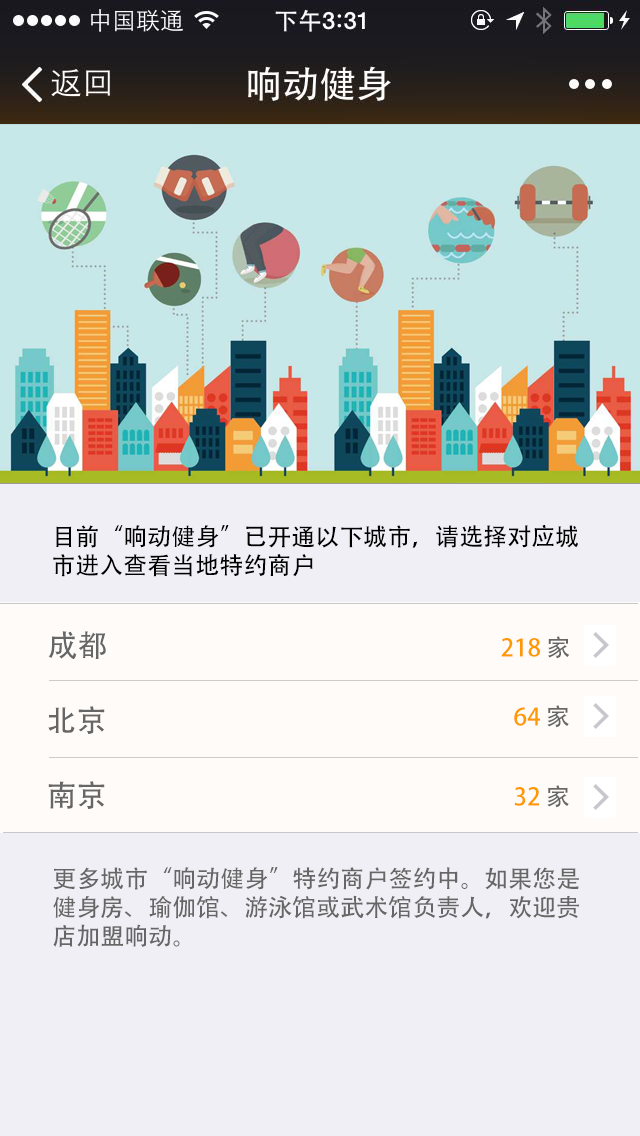
<style>
.page{position:relative;width:640px;height:1136px;background:#f0eff5}
.page>*{position:absolute;margin:0}
.t1{font:24px "AdobeHeitiStd-Regular";color:#000000}
.t2{font:30px "AdobeHeitiStd-Regular";color:#666666}
.t3{font:24px "AdobeHeitiStd-Regular";color:#ff9900}
.t4{font:24px "AdobeHeitiStd-Regular";color:#666666}
</style>
<div class="page">
<p class="t1" style="left:53px;top:524px;width:525px;height:53px">目前“响动健身”已开通以下城市，请选择对应城<br>市进入查看当地特约商户</p>
<p class="t2" style="left:48px;top:631px;width:58px;height:28px">成都</p>
<p class="t3" style="left:501px;top:636px;width:69px;height:23px">218 <span class="t4">家</span></p>
<p class="t2" style="left:48px;top:706px;width:57px;height:28px">北京</p>
<p class="t3" style="left:514px;top:705px;width:55px;height:23px">64 <span class="t4">家</span></p>
<p class="t2" style="left:48px;top:781px;width:57px;height:28px">南京</p>
<p class="t3" style="left:514px;top:785px;width:55px;height:23px">32 <span class="t4">家</span></p>
<p class="t4" style="left:53px;top:867px;width:526px;height:80px">更多城市“响动健身”特约商户签约中。如果您是<br>健身房、瑜伽馆、游泳馆或武术馆负责人，欢迎贵<br>店加盟响动。</p>
</div>
